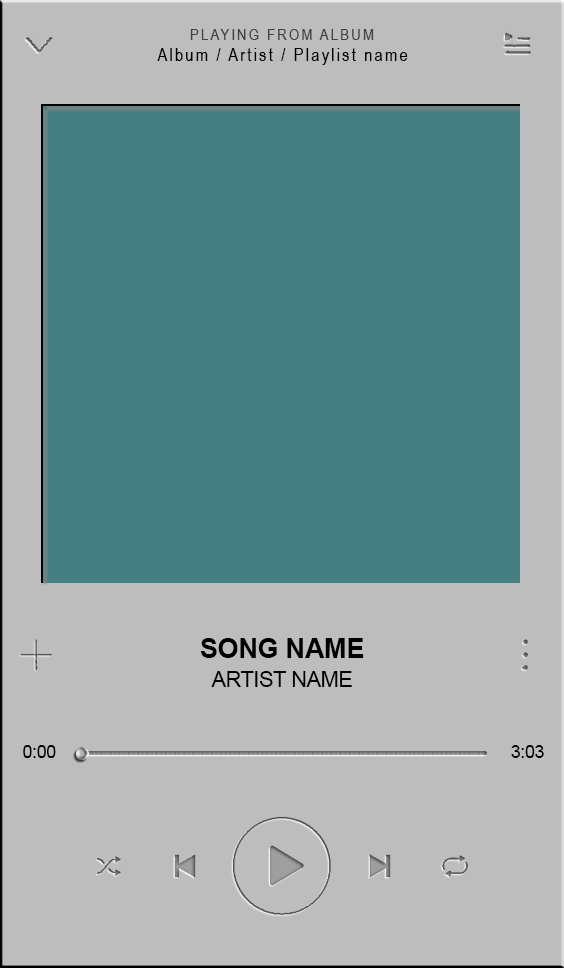
<style>
.page{position:relative;width:564px;height:968px;background:#bdbdbd}
.page>*{position:absolute;margin:0}
.t1{font:16.1px "ArialNarrow";letter-spacing:0.12em;color:#414141}
.t2{font:17.7px "ArialNarrow";letter-spacing:0.12em;color:#000000}
.t3{font:27.3px "Arial-BoldMT";letter-spacing:-0.02em;color:#000000}
.t4{font:21.7px "ArialMT";letter-spacing:-0.02em;color:#000000}
.t5{font:17.8px "ArialMT";letter-spacing:-0.02em;color:#000000}
</style>
<div class="page">
<p class="t1" style="left:190px;top:29px;width:184px;height:11px">PLAYING FROM ALBUM</p>
<p class="t2" style="left:157px;top:48px;width:251px;height:17px">Album / Artist / Playlist name</p>
<p class="t3" style="left:200px;top:638px;width:164px;height:20px">SONG NAME</p>
<p class="t4" style="left:211px;top:671px;width:141px;height:16px">ARTIST NAME</p>
<p class="t5" style="left:23px;top:745px;width:33px;height:13px">0:00</p>
<p class="t5" style="left:511px;top:745px;width:33px;height:13px">3:03</p>
</div>
